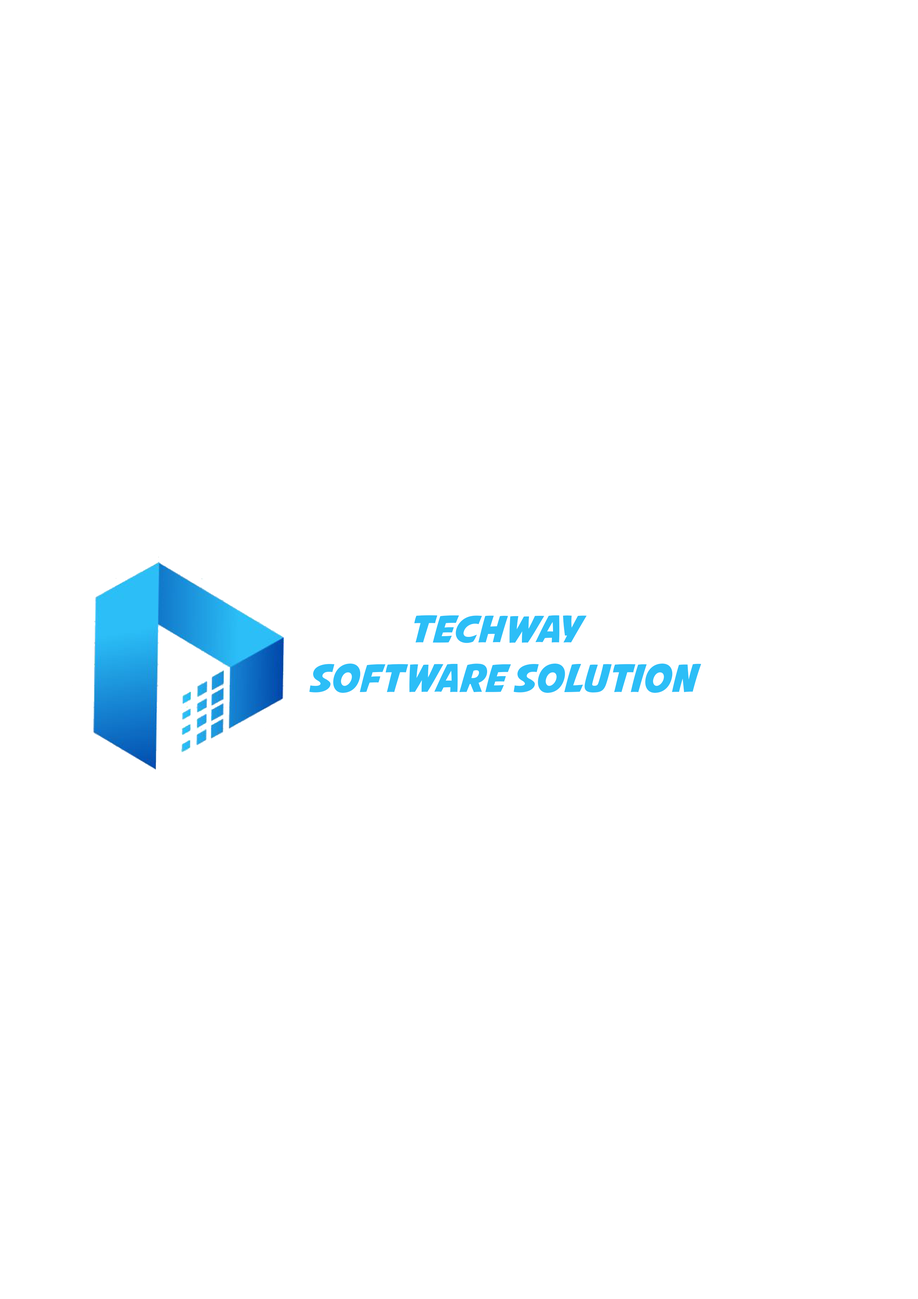
<style>
.page{position:relative;width:918px;height:1299px;background:#ffffff}
.page>*{position:absolute;margin:0}
.t1{font:37px "AvengeanceMightiestAvenger";color:#2cbef7;scale:1.06 1}
.t2{font:38.4px "AvengeanceMightiestAvenger";color:#2cbef7}
</style>
<div class="page">
<p class="t1" style="left:414px;top:615px;width:173px;height:28px">TECHWAY</p>
<p class="t2" style="left:309px;top:663px;width:393px;height:30px">SOFTWARE SOLUTION</p>
</div>
